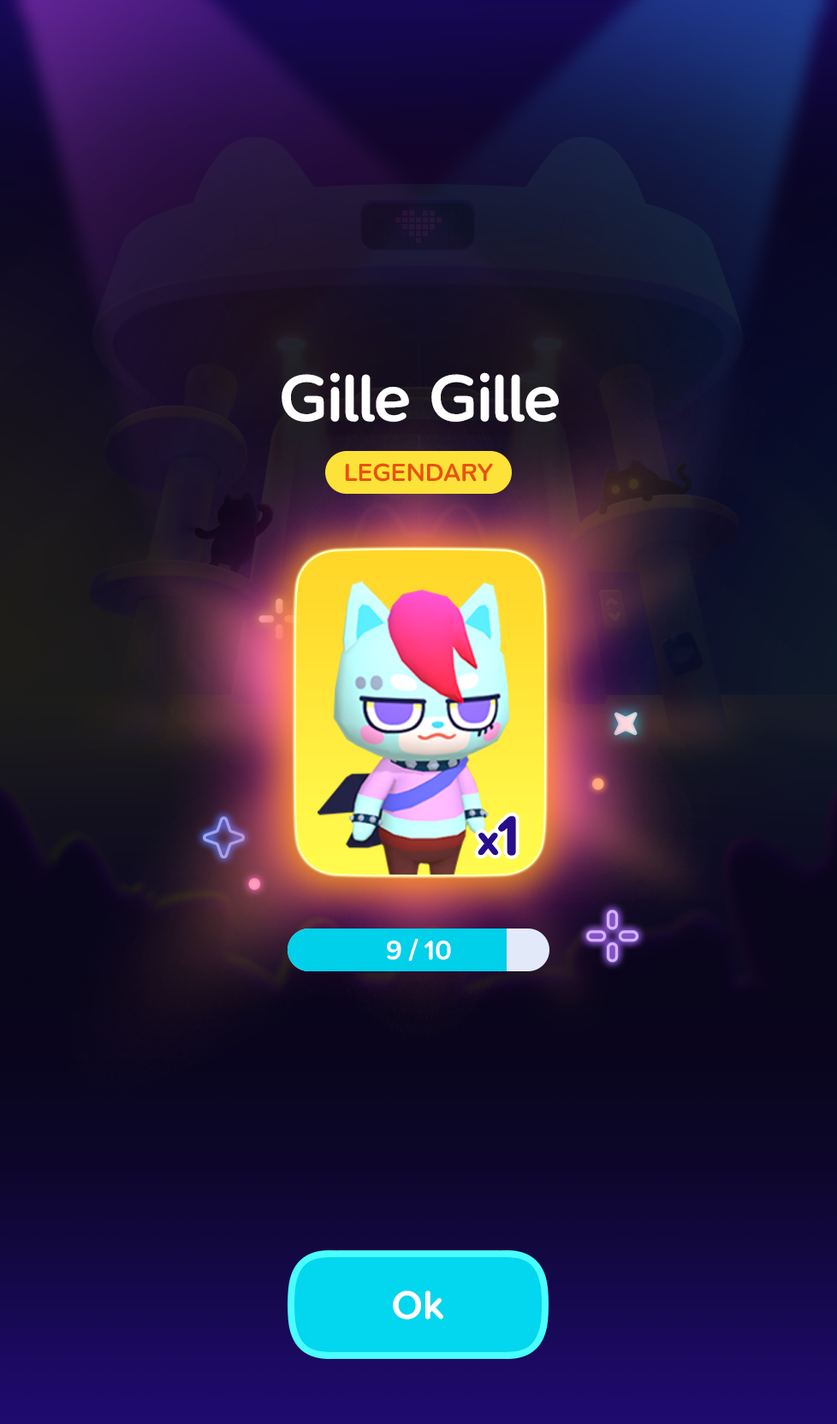
<style>
.page{position:relative;width:837px;height:1424px}
.page>*{position:absolute;margin:0}
.t1{font:68.5px "SNPro-SemiBold";letter-spacing:-0.01em;color:#ffffff}
.t2{font:25.7px "SNPro-SemiBold";letter-spacing:-0.01em;color:#e9520f;text-transform:uppercase}
.t3{font:42.2px "SNPro-SemiBold";letter-spacing:-0.01em;color:#280e8c;font-weight:bold}
.t4{font:55.4px "SNPro-SemiBold";letter-spacing:-0.01em;color:#280e8c;font-weight:bold}
.t5{font:27.4px "SNPro-SemiBold";letter-spacing:-0.01em;color:#ffffff}
.t6{font:41.1px "SNPro-SemiBold";letter-spacing:-0.01em;color:#ffffff}
</style>
<div class="page">
<p class="t1" style="left:282px;top:372px;width:277px;height:50px">Gille Gille</p>
<p class="t2" style="left:345px;top:463px;width:148px;height:19px">Legendary</p>
<p class="t3" style="left:478px;top:816px;width:38px;height:40px">x<span class="t4">1</span></p>
<p class="t5" style="left:387px;top:939px;width:64px;height:22px">9 / 10</p>
<p class="t6" style="left:393px;top:1291px;width:50px;height:29px">Ok</p>
</div>
